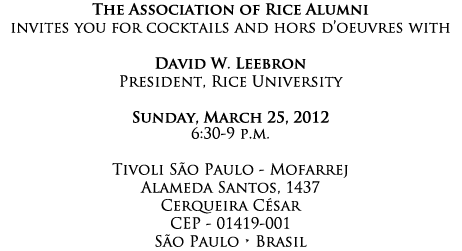
<style>
.page{position:relative;width:462px;height:251px;background:#ffffff}
.page>*{position:absolute;margin:0}
.t1{font:15px "TrajanPro-Regular";color:#000000}
.t2{font:15px "TrajanPro-Bold";color:#000000}
.t3{font:15px/16px "TrajanPro-Regular";color:#000000}
</style>
<div class="page">
<p class="t1" style="left:11px;top:2px;width:439px;height:245px;text-align:center"><span class="t2">The Association of Rice Alumni <br></span>invites you for cocktails and hors d’oeuvres with  <br><span class="t2"><br>David W. Leebron <br></span>President, Rice University <br><span class="t2"><br>Sunday, March 25, 2012 <br></span><span class="t3">6:30-9 p.m.  <br></span><br>Tivoli São Paulo - Mofarrej<br>Alameda Santos, 1437 <br>Cerqueira César <br>CEP - 01419-001<br>São Paulo • Brasil</p>
</div>
